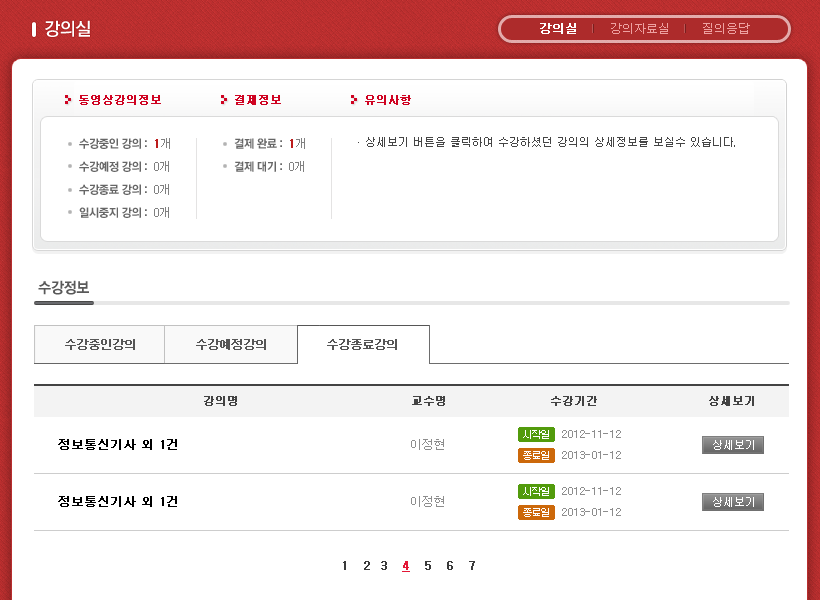
<style>
.page{position:relative;width:820px;height:600px;background:#ffffff}
.page>*{position:absolute;margin:0}
.t1{font:18px "YDVYGO540";letter-spacing:-0.035em;color:#ffffff}
.t2{font:12px "Dotum";color:#eea1a1}
.t3{font:12px "Dotum";color:#ffffff;font-weight:bold}
.t4{font:11px "Dotum";color:#cf0322;font-weight:bold}
.t5{font:11px "Dotum";color:#454545}
.t6{font:11.5px/23px "YDVYGO550";letter-spacing:-0.04em;color:#666666}
.t7{font:12px/23px "Dotum";color:#808080}
.t8{font:12px/23px "Dotum";color:#bc1c1c;font-weight:bold}
.t9{font:15px "YDVYGO550";letter-spacing:-0.035em;color:#595959}
.t10{font:12px "Dotum";letter-spacing:-0.08em;color:#565656;font-weight:bold}
.t11{font:11px "Dotum";color:#434343;font-weight:bold}
.t12{font:9px "Ãµ¸®¾ÈÃ¼H";color:#ffffff}
.t13{font:11px "Dotum";color:#8d8d8d}
.t14{font:12px "Dotum";color:#000000;font-weight:bold}
.t15{font:12px "Dotum";color:#8d8d8d}
.t16{font:11px "Gulim";color:#ffffff}
.t17{font:12px "Dotum";color:#3a3a3a;font-weight:bold}
.t18{font:12px "Dotum";color:#e31736;font-weight:bold;text-decoration:underline}
</style>
<div class="page">
<p class="t1" style="left:45px;top:20px;width:45px;height:17px">강의실</p>
<p class="t2" style="left:540px;top:23px;width:210px;height:11px"><span class="t3">강의실        </span>강의자료실        질의응답</p>
<p class="t4" style="left:79px;top:95px;width:82px;height:10px">동영상강의정보</p>
<p class="t4" style="left:235px;top:95px;width:46px;height:10px">결제정보</p>
<p class="t4" style="left:365px;top:95px;width:46px;height:10px">유의사항</p>
<p class="t5" style="left:358px;top:137px;width:377px;height:10px">· 상세보기 버튼을 클릭하여 수강하셨던 강의의 상세정보를 보실수 있습니다.</p>
<p class="t6" style="left:79px;top:138px;width:68px;height:80px">수강중인 강의 : <br>수강예정 강의 :<br>수강종료 강의 :<br>일시중지 강의 :</p>
<p class="t7" style="left:154px;top:138px;width:16px;height:80px"><span class="t8">1</span>개<br>0개<br>0개<br>0개</p>
<p class="t6" style="left:234px;top:138px;width:48px;height:34px">결제 완료 : <br>결제 대기 :</p>
<p class="t7" style="left:289px;top:138px;width:16px;height:34px"><span class="t8">1</span>개<br>0개</p>
<p class="t9" style="left:38px;top:280px;width:51px;height:15px">수강정보</p>
<p class="t10" style="left:65px;top:339px;width:70px;height:11px">수강중인강의</p>
<p class="t10" style="left:196px;top:339px;width:70px;height:11px">수강예정강의</p>
<p class="t10" style="left:327px;top:339px;width:70px;height:11px">수강종료강의</p>
<p class="t11" style="left:204px;top:396px;width:33px;height:10px">강의명</p>
<p class="t11" style="left:412px;top:396px;width:33px;height:10px">교수명</p>
<p class="t11" style="left:551px;top:396px;width:46px;height:10px">수강기간</p>
<p class="t11" style="left:709px;top:396px;width:45px;height:10px">상세보기</p>
<p class="t12" style="left:523px;top:430px;width:26px;height:9px">시작일</p>
<p class="t13" style="left:562px;top:430px;width:59px;height:8px">2012-11-12</p>
<p class="t14" style="left:58px;top:439px;width:119px;height:11px">정보통신기사 외 1건</p>
<p class="t15" style="left:411px;top:439px;width:33px;height:11px">이정현</p>
<p class="t16" style="left:713px;top:440px;width:41px;height:10px">상세보기</p>
<p class="t12" style="left:523px;top:451px;width:26px;height:9px">종료일</p>
<p class="t13" style="left:562px;top:451px;width:59px;height:8px">2013-01-12</p>
<p class="t14" style="left:58px;top:496px;width:119px;height:11px">정보통신기사 외 1건</p>
<p class="t15" style="left:411px;top:496px;width:33px;height:11px">이정현</p>
<p class="t12" style="left:523px;top:487px;width:26px;height:9px">시작일</p>
<p class="t13" style="left:562px;top:487px;width:59px;height:8px">2012-11-12</p>
<p class="t16" style="left:713px;top:497px;width:41px;height:10px">상세보기</p>
<p class="t12" style="left:523px;top:508px;width:26px;height:9px">종료일</p>
<p class="t13" style="left:562px;top:508px;width:59px;height:8px">2013-01-12</p>
<p class="t17" style="left:343px;top:561px;width:132px;height:11px">1   2  3   <span class="t18">4</span>   5   6   7</p>
</div>
